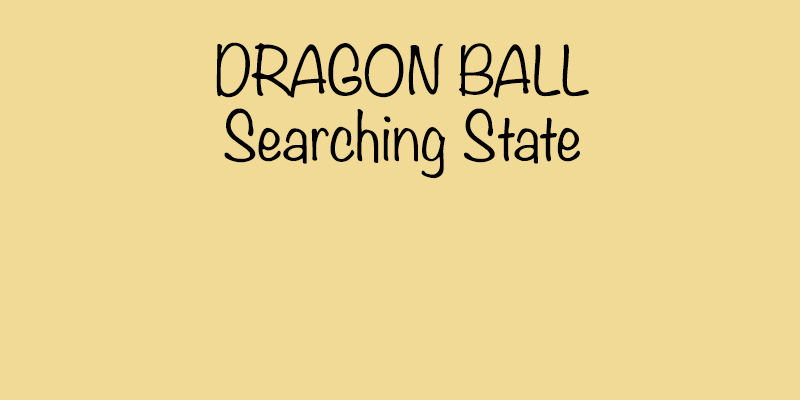
<style>
.page{position:relative;width:800px;height:400px;background:#f0da96}
.page>*{position:absolute;margin:0}
.t1{font:60px/65.3px "Noteworthy-Light";color:#000000}
</style>
<div class="page">
<p class="t1" style="left:216px;top:42px;width:373px;height:137px;text-align:center">DRAGON BALL<br>Searching State</p>
</div>
